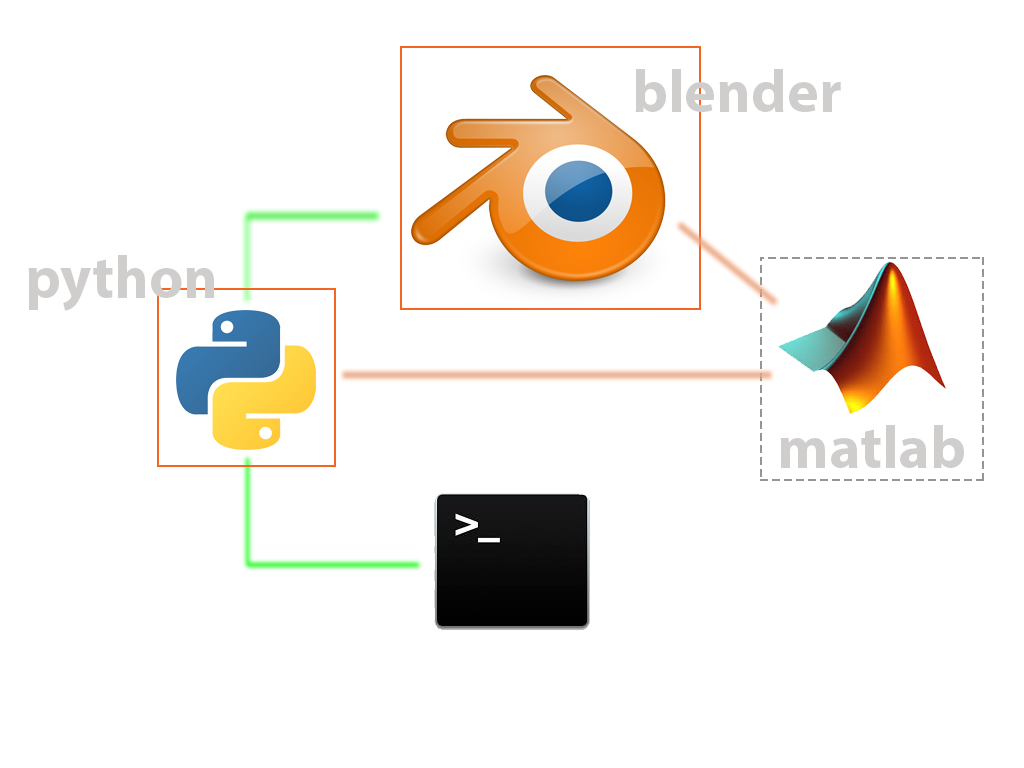
<style>
.page{position:relative;width:1024px;height:768px;background:#ffffff}
.page>*{position:absolute;margin:0}
.t1{font:60px "MyriadPro-Bold";color:#d0cdcd}
</style>
<div class="page">
<p class="t1" style="left:635px;top:69px;width:206px;height:43px">blender</p>
<p class="t1" style="left:28px;top:255px;width:186px;height:56px">python</p>
<p class="t1" style="left:780px;top:425px;width:184px;height:43px">matlab</p>
</div>
